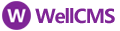
<style>
.page{position:relative;width:120px;height:31px;background:#ffffff}
.page>*{position:absolute;margin:0}
.t1{font:18.7px "MicrosoftYaHei-Bold";letter-spacing:-0.06em;color:#7f2596}
</style>
<div class="page">
<p class="t1" style="left:35px;top:8px;width:80px;height:16px">WellCMS</p>
</div>
